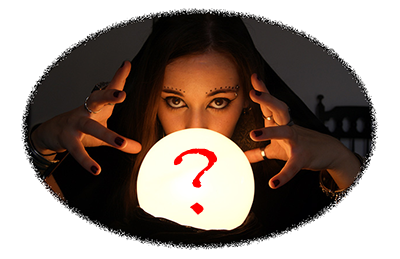
<style>
.page{position:relative;width:400px;height:259px;background:#ffffff}
.page>*{position:absolute;margin:0}
.t1{font:120px "Papyrus-Regular";color:#ff0000}
</style>
<div class="page">
<p class="t1" style="left:173px;top:148px;width:44px;height:67px">?</p>
</div>
